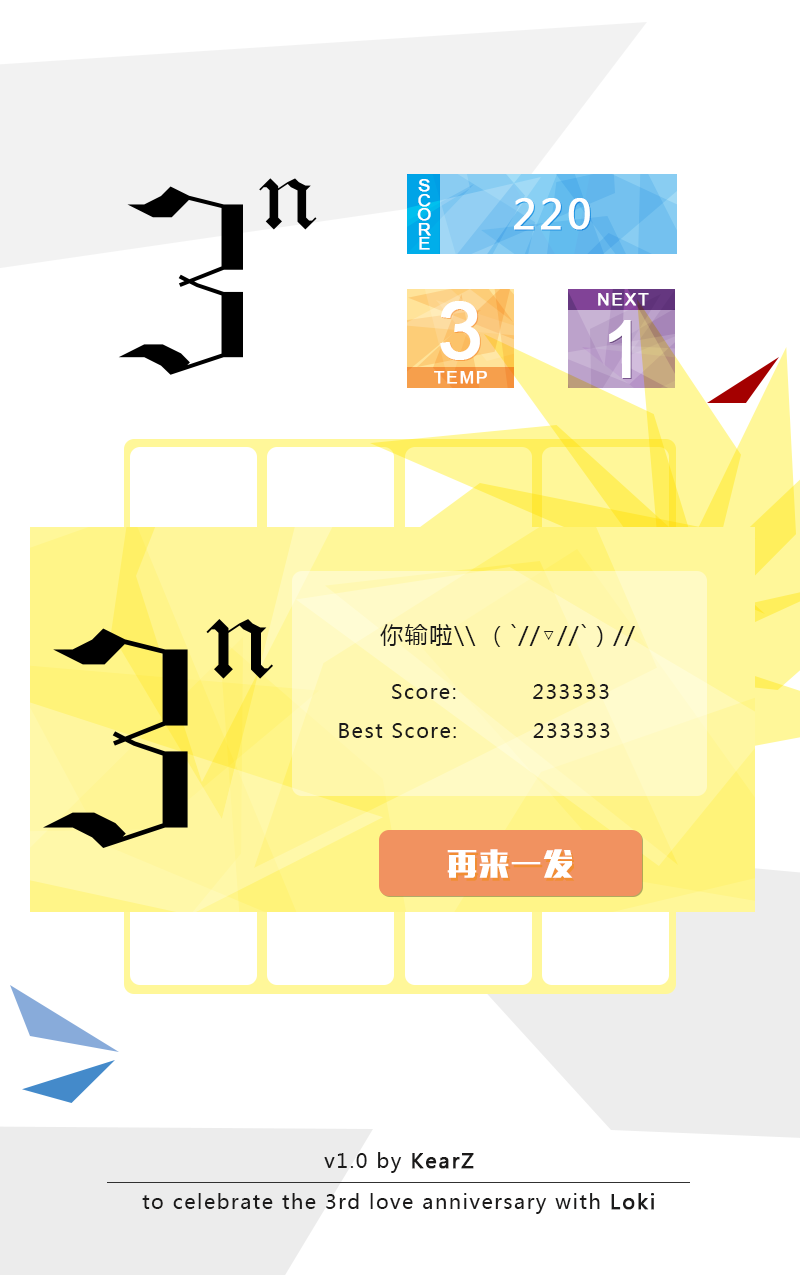
<style>
.page{position:relative;width:800px;height:1275px;background:#ffffff}
.page>*{position:absolute;margin:0}
.t1{font:17.5px/14.6px "ArialMT";letter-spacing:0.075em;color:#ffffff;font-weight:bold;scale:1.04 1}
.t2{font:40px "MicrosoftYaHei";letter-spacing:0.075em;color:#ffffff;font-weight:bold}
.t3{font:17.3px "ArialMT";letter-spacing:0.075em;color:#ffffff;font-weight:bold}
.t4{font:79.2px "ArialMT";letter-spacing:0.075em;color:#ffffff;font-weight:bold}
.t5{font:79.2px "ArialMT";letter-spacing:0.075em;color:#ffffff;font-weight:bold;scale:0.93 1}
.t6{font:23px "MicrosoftYaHei";letter-spacing:0.075em;color:#1b1a1a}
.t7{font:20px "MicrosoftYaHei";letter-spacing:0.075em;color:#1b1a1a}
.t8{font:30px "MFLiHei_Noncommercial-Regular";letter-spacing:0.075em;color:#ffffff}
.t9{font:20px "MicrosoftYaHei";letter-spacing:0.075em;color:#1b1a1a;font-weight:bold}
</style>
<div class="page">
<p class="t1" style="left:417px;top:179px;width:14px;height:71px;text-align:center">S<br>C<br>O<br>R<br>E</p>
<p class="t2" style="left:514px;top:198px;width:76px;height:32px">220</p>
<p class="t3" style="left:598px;top:293px;width:51px;height:13px">NEXT</p>
<p class="t4" style="left:440px;top:301px;width:40px;height:59px">3</p>
<p class="t5" style="left:609px;top:320px;width:22px;height:58px">1</p>
<p class="t3" style="left:434px;top:371px;width:53px;height:13px">TEMP</p>
<p class="t6" style="left:380px;top:624px;width:255px;height:23px">你输啦\\ （`//▽//`）//</p>
<p class="t7" style="left:392px;top:684px;width:217px;height:15px">Score:          233333</p>
<p class="t7" style="left:339px;top:723px;width:271px;height:15px">Best Score:          233333</p>
<p class="t8" style="left:447px;top:849px;width:126px;height:29px">再来一发</p>
<p class="t7" style="left:324px;top:1152px;width:150px;height:21px">v1.0 by <span class="t9">KearZ</span></p>
<p class="t7" style="left:142px;top:1193px;width:512px;height:21px">to celebrate the 3rd love anniversary with <span class="t9">Loki</span></p>
</div>
